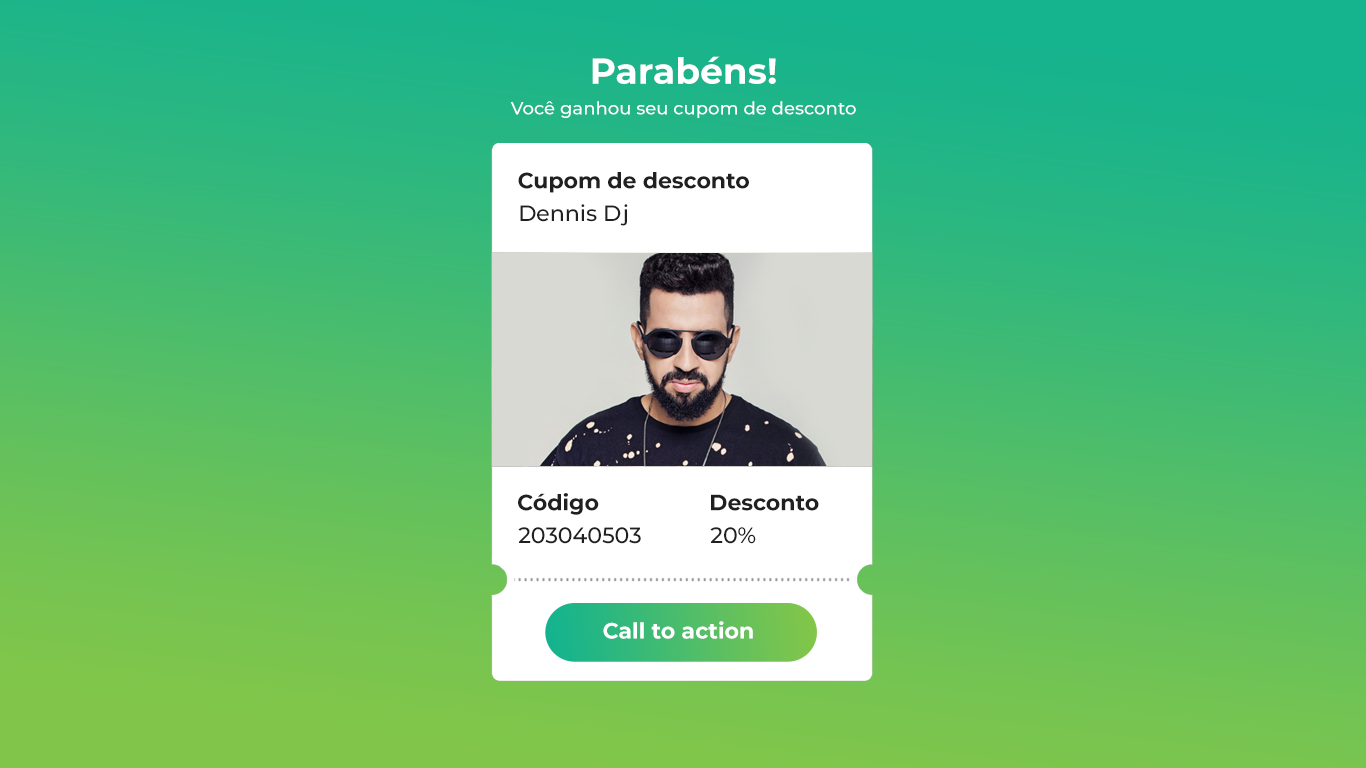
<style>
.page{position:relative;width:1366px;height:768px}
.page>*{position:absolute;margin:0}
.t1{font:36px "Montserrat-Bold";color:#ffffff}
.t2{font:18px "Montserrat-Medium";color:#ffffff}
.t3{font:22px "Montserrat-Bold";color:#202020}
.t4{font:22px "Montserrat-Medium";color:#202020}
.t5{font:22px "Montserrat-Bold";color:#ffffff}
</style>
<div class="page">
<p class="t1" style="left:592px;top:56px;width:184px;height:28px">Parabéns!</p>
<p class="t2" style="left:510px;top:101px;width:346px;height:17px">Você ganhou seu cupom de desconto</p>
<p class="t3" style="left:518px;top:172px;width:231px;height:21px">Cupom de desconto</p>
<p class="t4" style="left:520px;top:204px;width:108px;height:22px">Dennis Dj</p>
<p class="t3" style="left:518px;top:493px;width:81px;height:22px">Código</p>
<p class="t3" style="left:711px;top:494px;width:108px;height:17px">Desconto</p>
<p class="t4" style="left:518px;top:527px;width:123px;height:17px">203040503</p>
<p class="t4" style="left:710px;top:527px;width:46px;height:17px">20%</p>
<p class="t5" style="left:603px;top:621px;width:150px;height:18px">Call to action</p>
</div>
